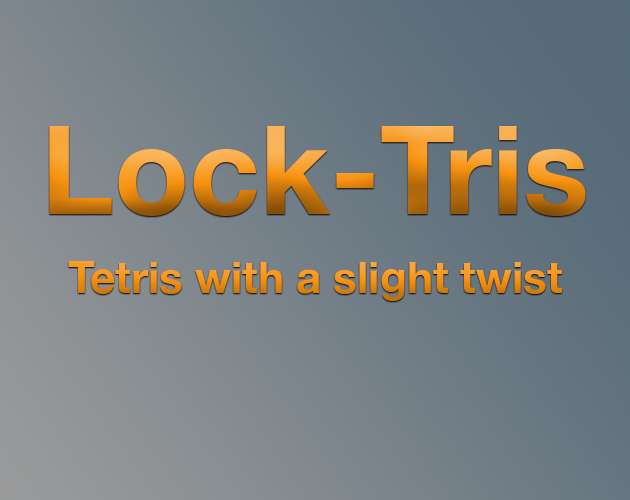
<style>
.page{position:relative;width:630px;height:500px}
.page>*{position:absolute;margin:0}
.t1{font:123px "HelveticaNeue-Bold"}
.t2{font:44px "HelveticaNeue-Bold"}
</style>
<div class="page">
<p class="t1" style="left:49px;top:126px;width:537px;height:90px">Lock-Tris</p>
<p class="t2" style="left:68px;top:261px;width:494px;height:40px">Tetris with a slight twist</p>
</div>
